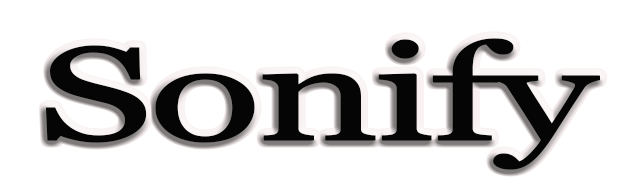
<style>
.page{position:relative;width:644px;height:196px;background:#ffffff}
.page>*{position:absolute;margin:0}
.t1{font:133.4px "Georgia";letter-spacing:-0.05em;color:#050505;font-weight:bold;scale:1.56 1}
</style>
<div class="page">
<p class="t1" style="left:45px;top:38px;width:555px;height:132px">Sonify</p>
</div>
